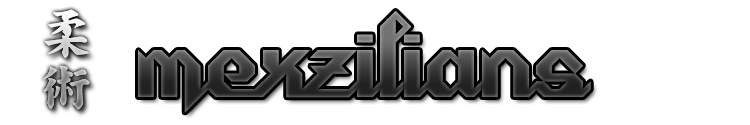
<style>
.page{position:relative;width:750px;height:125px;background:#ffffff}
.page>*{position:absolute;margin:0}
.t1{font:125px "Cursivertex"}
</style>
<div class="page">
<p class="t1" style="left:138px;top:11px;width:453px;height:102px">mexzilians</p>
</div>
